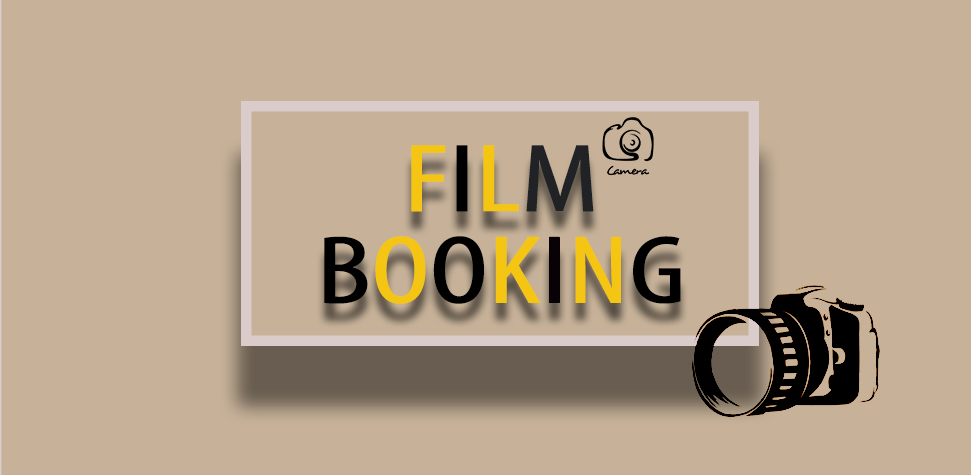
<style>
.page{position:relative;width:971px;height:475px;background:#c7b299}
.page>*{position:absolute;margin:0}
.t1{font:96.9px/91.7px "MyriadPro-Cond";letter-spacing:-0.02em;color:#f4c613;font-weight:bold;scale:1.33 1}
.t2{font:96.9px/91.7px "MyriadPro-Cond";letter-spacing:-0.02em;color:#000000;font-weight:bold;scale:1.33 1}
.t3{font:96.9px/91.7px "MyriadPro-Cond";letter-spacing:-0.02em;color:#212226;font-weight:bold;scale:1.33 1}
.t4{font:96.9px/91.7px "MyriadPro-Cond";letter-spacing:-0.02em;color:#080105;font-weight:bold;scale:1.33 1}
</style>
<div class="page">
<p class="t1" style="left:324px;top:145px;width:357px;height:159px;text-align:center">F<span class="t2">I</span>L<span class="t3">M<br></span><span class="t2">B</span>O<span class="t2">O</span>K<span class="t4">I</span>N<span class="t2">G</span></p>
</div>
